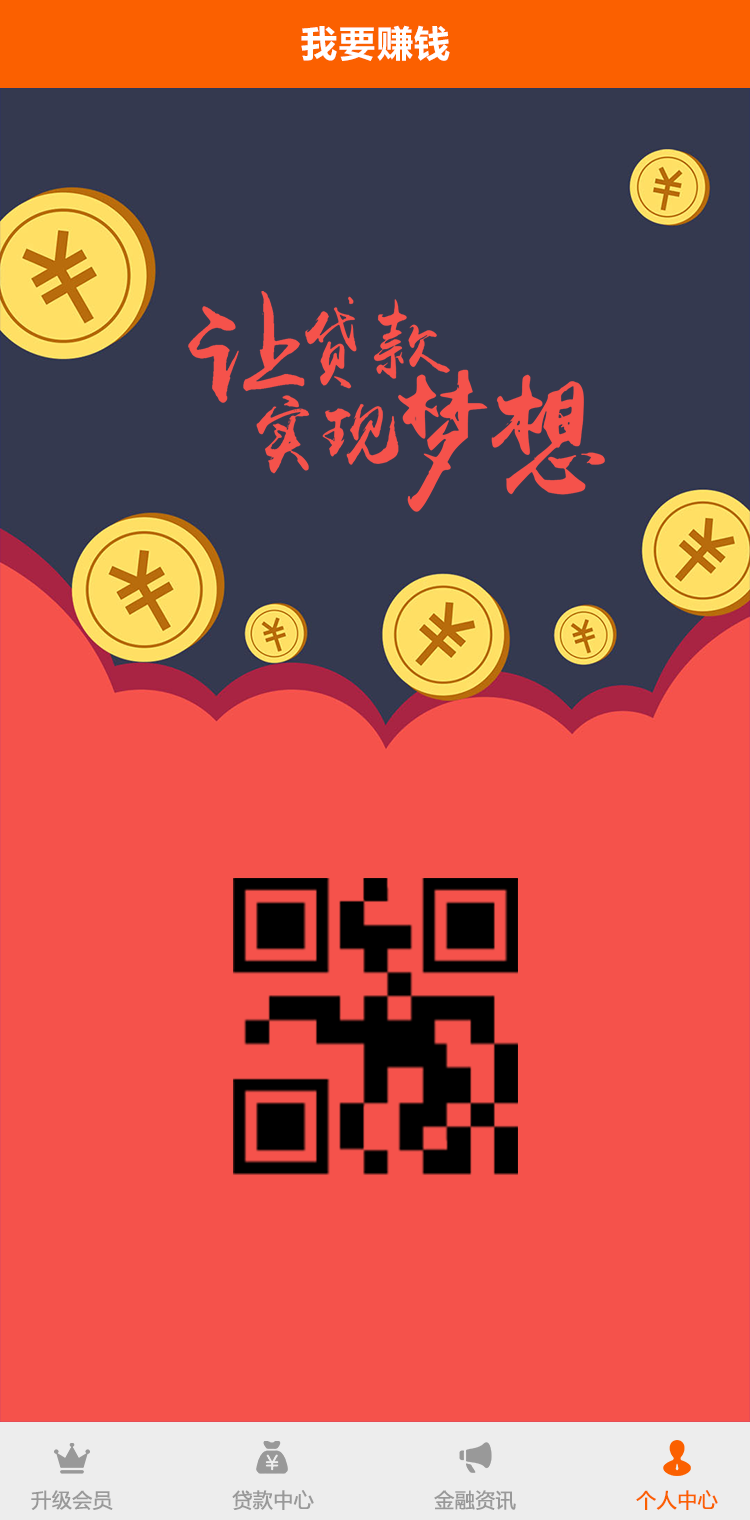
<style>
.page{position:relative;width:750px;height:1520px;background:#f5524b}
.page>*{position:absolute;margin:0}
.t1{font:36px "MicrosoftYaHei-Bold";letter-spacing:0.05em;color:#ffffff}
.t2{font:20px "MicrosoftYaHei";color:#999999;font-weight:bold}
.t3{font:20px "MicrosoftYaHei";color:#fb6000;font-weight:bold}
</style>
<div class="page">
<p class="t1" style="left:301px;top:25px;width:149px;height:36px">我要赚钱</p>
<p class="t2" style="left:31px;top:1490px;width:82px;height:20px">升级会员</p>
<p class="t2" style="left:232px;top:1490px;width:82px;height:20px">贷款中心</p>
<p class="t2" style="left:434px;top:1490px;width:82px;height:20px">金融资讯</p>
<p class="t3" style="left:636px;top:1490px;width:82px;height:20px">个人中心</p>
</div>
